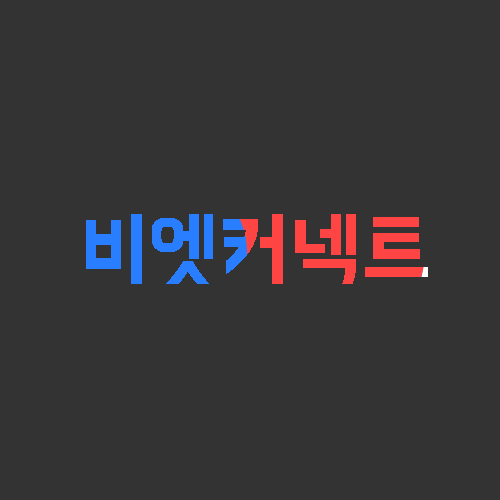
<style>
.page{position:relative;width:500px;height:500px;background:#333333}
.page>*{position:absolute;margin:0}
.t1{font:83.3px "BMHANNAPro"}
</style>
<div class="page">
<p class="t1" style="left:86px;top:214px;width:342px;height:70px">비엣커넥트</p>
</div>
